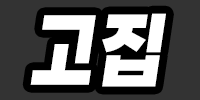
<style>
.page{position:relative;width:200px;height:100px;background:#333333}
.page>*{position:absolute;margin:0}
.t1{font:84.9px "SBAggroB";letter-spacing:0.05em;color:#ffffff;scale:0.79 1}
</style>
<div class="page">
<p class="t1" style="left:30px;top:13px;width:136px;height:74px">고집</p>
</div>
